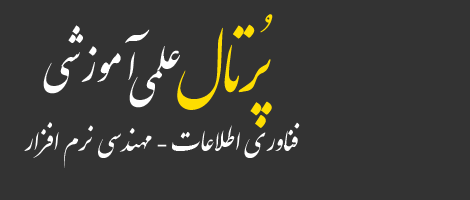
<style>
.page{position:relative;width:470px;height:200px;background:#333333}
.page>*{position:absolute;margin:0}
.t1{font:70px "IranNastaliq";color:#fedd00}
.t2{font:48px "IranNastaliq";color:#ffffff}
.t3{font:30px "IranNastaliq";color:#ffffff}
</style>
<div class="page">
<p class="t1" style="left:177px;top:14px;width:96px;height:114px">پُرتـال</p>
<p class="t2" style="left:43px;top:25px;width:107px;height:69px">آموزشي</p>
<p class="t2" style="left:129px;top:46px;width:51px;height:62px">علمي</p>
<p class="t3" style="left:24px;top:122px;width:276px;height:46px">فناوري اطلاعات - مهندسي نرم افزار</p>
</div>
